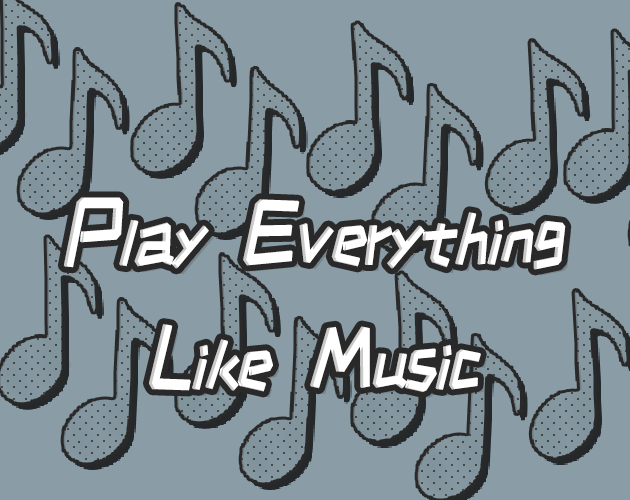
<style>
.page{position:relative;width:630px;height:500px;background:#8a9ca5}
.page>*{position:absolute;margin:0}
.t1{font:71.4px/125px "HappyZcool-2016";color:#ffffff;font-weight:bold;font-style:italic;scale:0.84 1}
.t2{font:89.2px/125px "HappyZcool-2016";color:#ffffff;font-weight:bold;font-style:italic;scale:0.84 1}
</style>
<div class="page">
<p class="t1" style="left:63px;top:197px;width:503px;height:195px;text-align:center"><span class="t2">P</span>lay<span class="t2"> E</span>verything<br><span class="t2">L</span>ike<span class="t2"> M</span>usic</p>
</div>
